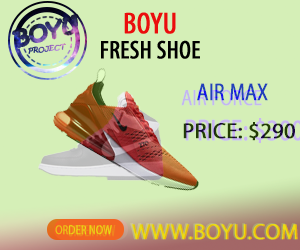
<style>
.page{position:relative;width:300px;height:250px;background:#d5efb7}
.page>*{position:absolute;margin:0}
.t1{font:17.7px "KristenITC-Regular";font-weight:bold;font-style:italic;scale:1.14 1}
.t2{font:30px "MyriadPro-Cond";letter-spacing:0.001em;color:#eb0d0d;text-transform:uppercase;font-weight:bold}
.t3{font:25.4px "MyriadPro-Cond";letter-spacing:0.001em;color:#000000;text-transform:uppercase;font-weight:bold}
.t4{font:6.2px "KristenITC-Regular";font-weight:bold;font-style:italic;scale:1.11 1}
.t5{font:22.4px "MyriadPro-Regular";letter-spacing:0.001em;color:#c4b7ef;text-transform:uppercase;font-weight:bold;scale:0.78 1}
.t6{font:24.4px "MyriadPro-Regular";letter-spacing:0.001em;color:#2341ba;text-transform:uppercase;font-weight:bold;scale:0.78 1}
.t7{font:22px "MyriadPro-Regular";letter-spacing:0.001em;text-transform:uppercase;font-weight:bold}
.t8{font:12.6px "MyriadPro-Regular";letter-spacing:0.001em;color:#ecc716;text-transform:uppercase;font-weight:bold;scale:0.8 1}
.t9{font:16.5px "MyriadPro-Cond";letter-spacing:0.001em;text-transform:uppercase;font-weight:bold;scale:0.71 1}
.t10{font:23.5px "MyriadPro-Regular";letter-spacing:0.001em;text-transform:uppercase;font-weight:bold;scale:0.93 1}
.t11{font:22px "MyriadPro-Regular";letter-spacing:0.001em;color:#eadd13;text-transform:uppercase;font-weight:bold}
</style>
<div class="page">
<p class="t1" style="left:13px;top:15px;width:65px;height:33px;rotate:-14deg">BOYU</p>
<p class="t1" style="left:13px;top:15px;width:65px;height:33px;rotate:-14deg">BOYU</p>
<p class="t2" style="left:124px;top:12px;width:52px;height:22px">boyu</p>
<p class="t2" style="left:124px;top:12px;width:52px;height:22px">boyu</p>
<p class="t3" style="left:101px;top:40px;width:99px;height:19px">Fresh shoe</p>
<p class="t3" style="left:101px;top:40px;width:99px;height:19px">Fresh shoe</p>
<p class="t4" style="left:28px;top:43px;width:38px;height:11px;rotate:-6deg">PROJECT</p>
<p class="t4" style="left:28px;top:43px;width:38px;height:11px;rotate:-6deg">PROJECT</p>
<p class="t5" style="left:181px;top:89px;width:81px;height:17px">AIR FORCE</p>
<p class="t6" style="left:197px;top:83px;width:71px;height:18px">air max</p>
<p class="t7" style="left:183px;top:122px;width:112px;height:19px">PRICE: $290</p>
<p class="t8" style="left:55px;top:225px;width:57px;height:10px">Order NOW</p>
<p class="t9" style="left:68px;top:224px;width:48px;height:13px">Order NOW</p>
<p class="t10" style="left:130px;top:223px;width:167px;height:17px">WWW.BOYU.COM</p>
<p class="t11" style="left:132px;top:224px;width:166px;height:16px">WWW.BOYU.COM</p>
</div>
